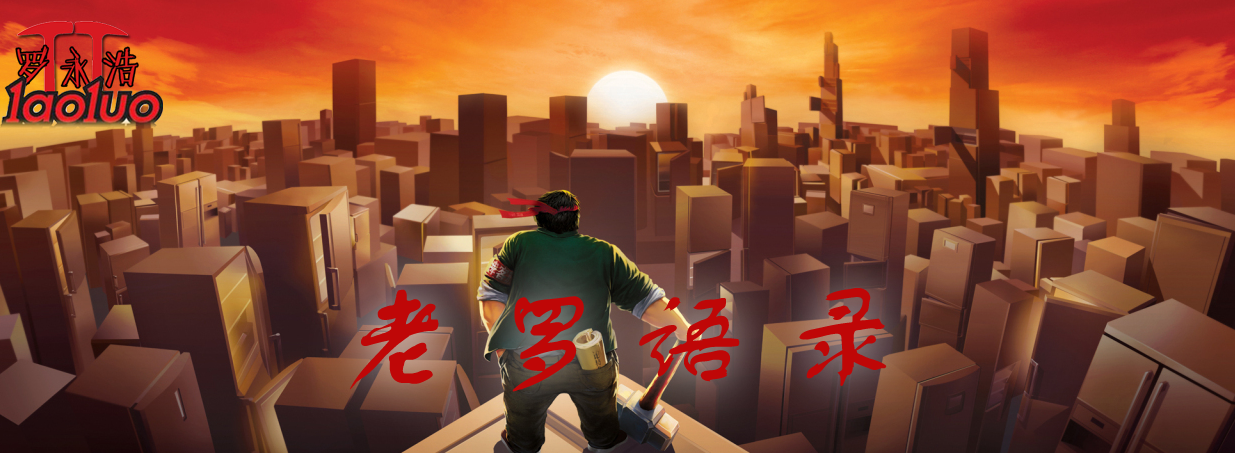
<style>
.page{position:relative;width:1235px;height:453px}
.page>*{position:absolute;margin:0}
.t1{font:118.8px "FZSTK--GBK1-0";color:#bf0707}
</style>
<div class="page">
<p class="t1" style="left:349px;top:288px;width:538px;height:104px">老 罗 语 录</p>
</div>
